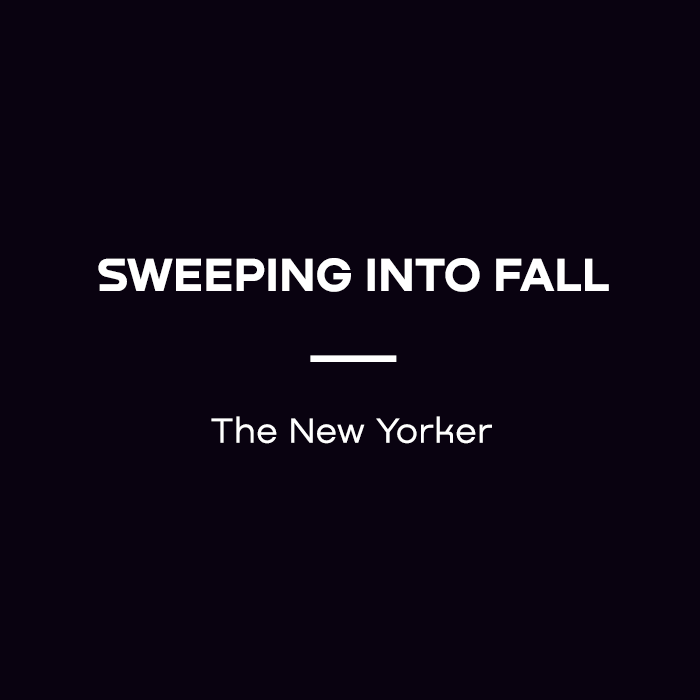
<style>
.page{position:relative;width:700px;height:700px;background:#090210}
.page>*{position:absolute;margin:0}
.t1{font:48px "Nekst-Bold";letter-spacing:0.01em;color:#ffffff}
.t2{font:48px "Nekst-Bold";letter-spacing:0.01em;color:#ffffff;scale:2.37 1}
.t3{font:36px "Nekst-Regular";letter-spacing:0.01em;color:#ffffff}
</style>
<div class="page">
<p class="t1" style="left:98px;top:258px;width:511px;height:34px">SWEEPING INTO FALL</p>
<p class="t2" style="left:310px;top:355px;width:87px;height:7px">—</p>
<p class="t3" style="left:211px;top:416px;width:281px;height:28px">The New Yorker</p>
</div>
